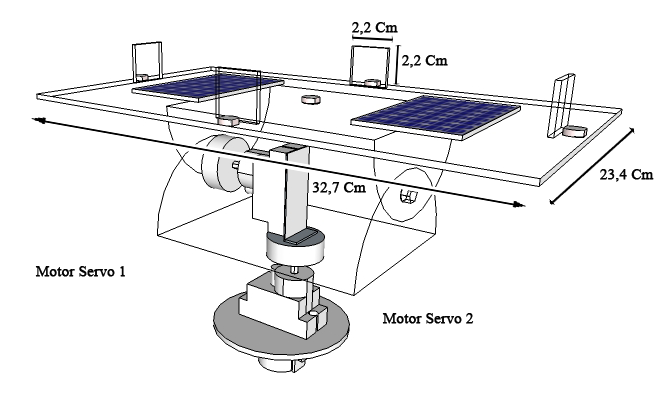
<style>
.page{position:relative;width:672px;height:400px;background:#ffffff}
.page>*{position:absolute;margin:0}
.t1{font:14.7px "TimesNewRomanPSMT";color:#030303;font-weight:bold}
</style>
<div class="page">
<p class="t1" style="left:352px;top:22px;width:46px;height:13px">2,2 Cm</p>
<p class="t1" style="left:402px;top:55px;width:46px;height:13px">2,2 Cm</p>
<p class="t1" style="left:600px;top:169px;width:54px;height:13px">23,4 Cm</p>
<p class="t1" style="left:312px;top:182px;width:54px;height:13px">32,7 Cm</p>
<p class="t1" style="left:35px;top:266px;width:90px;height:11px">Motor Servo 1</p>
<p class="t1" style="left:382px;top:313px;width:92px;height:11px">Motor Servo 2</p>
</div>
